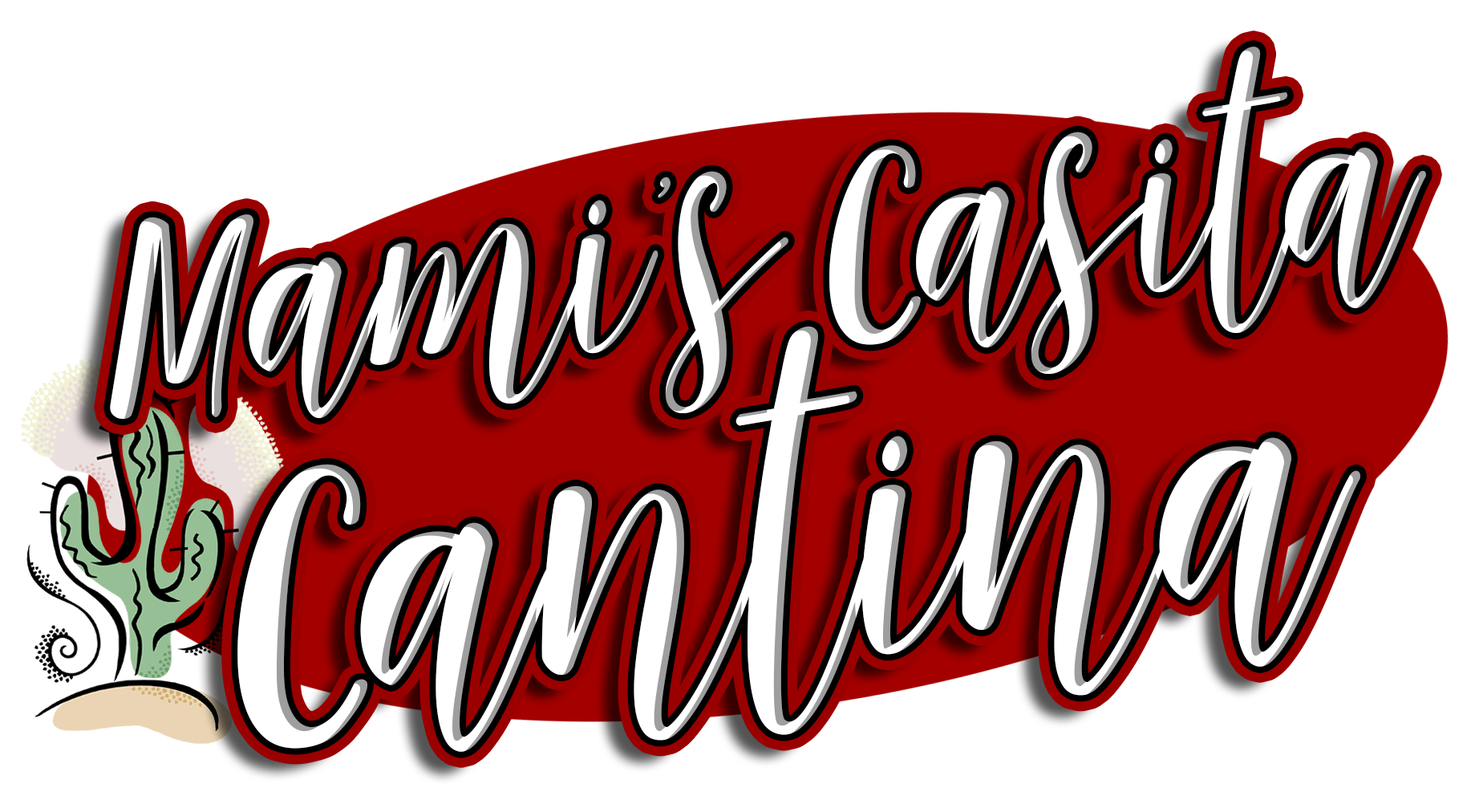
<style>
.page{position:relative;width:1483px;height:804px;background:#ffffff}
.page>*{position:absolute;margin:0}
.t1{font:197px/22.2px "MalisiaScript";color:#ffffff}
.t2{font:280.8px/320.9px "MalisiaScript";color:#ffffff}
</style>
<div class="page">
<p class="t1" style="left:110px;top:47px;width:1316px;height:705px;text-align:center;rotate:-6deg">Mami’s Casita <br><span class="t2">Cantina</span></p>
<p class="t1" style="left:110px;top:47px;width:1316px;height:705px;text-align:center;rotate:-6deg">Mami’s Casita <br><span class="t2">Cantina</span></p>
</div>
